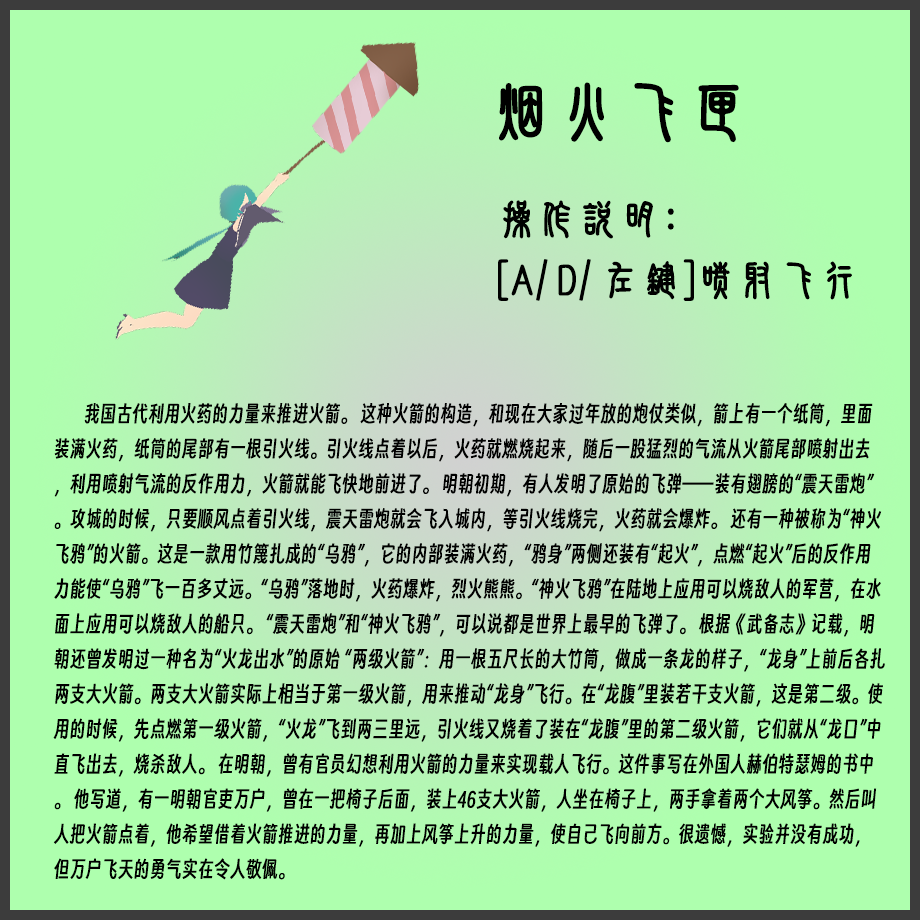
<style>
.page{position:relative;width:920px;height:920px;background:#aeffae}
.page>*{position:absolute;margin:0}
.t1{font:64px "SJxiaozhuanjian-Regular";color:#000000;font-weight:bold}
.t2{font:40px/61px "SJxiaozhuanjian-Regular";color:#000000;font-weight:bold}
.t3{font:20.8px "SmileySans-Oblique";color:#000000;scale:0.96 1}
</style>
<div class="page">
<p class="t1" style="left:499px;top:82px;width:240px;height:61px">烟火飞匣</p>
<p class="t2" style="left:498px;top:200px;width:354px;height:101px">操作说明：<br>[A/D/左键]喷射飞行</p>
<p class="t3" style="left:53px;top:402px;width:832px;height:478px">我国古代利用火药的力量来推进火箭。 这种火箭的构造，和现在大家过年放的炮仗类似，箭上有一个纸筒，里面装满火药，纸筒的尾部有一根引火线。引火线点着以后，火药就燃烧起来，随后一股猛烈的气流从火箭尾部喷射出去，利用喷射气流的反作用力，火箭就能飞快地前进了。 明朝初期，有人发明了原始的飞弹——装有翅膀的“震天雷炮”。攻城的时候，只要顺风点着引火线，震天雷炮就会飞入城内，等引火线烧完，火药就会爆炸。 还有一种被称为“神火飞鸦”的火箭。这是一款用竹篾扎成的“乌鸦”，它的内部装满火药，“鸦身”两侧还装有“起火”，点燃“起火”后的反作用力能使“乌鸦”飞一百多丈远。“乌鸦”落地时，火药爆炸，烈火熊熊。“神火飞鸦”在陆地上应用可以烧敌人的军营，在水面上应用可以烧敌人的船只。 “震天雷炮”和“神火飞鸦”，可以说都是世界上最早的飞弹了。 根据《武备志》记载，明朝还曾发明过一种名为“火龙出水”的原始 “两级火箭”：用一根五尺长的大竹筒，做成一条龙的样子，“龙身”上前后各扎两支大火箭。两支大火箭实际上相当于第一级火箭，用来推动“龙身”飞行。在“龙腹”里装若干支火箭，这是第二级。使用的时候，先点燃第一级火箭，“火龙”飞到两三里远，引火线又烧着了装在“龙腹”里的第二级火箭，它们就从“龙口”中直飞出去，烧杀敌人。 在明朝，曾有官员幻想利用火箭的力量来实现载人飞行。这件事写在外国人赫伯特瑟姆的书中。 他写道，有一明朝官吏万户，曾在一把椅子后面，装上46支大火箭，人坐在椅子上，两手拿着两个大风筝。然后叫人把火箭点着，他希望借着火箭推进的力量，再加上风筝上升的力量，使自己飞向前方。很遗憾，实验并没有成功，但万户飞天的勇气实在令人敬佩。</p>
</div>
